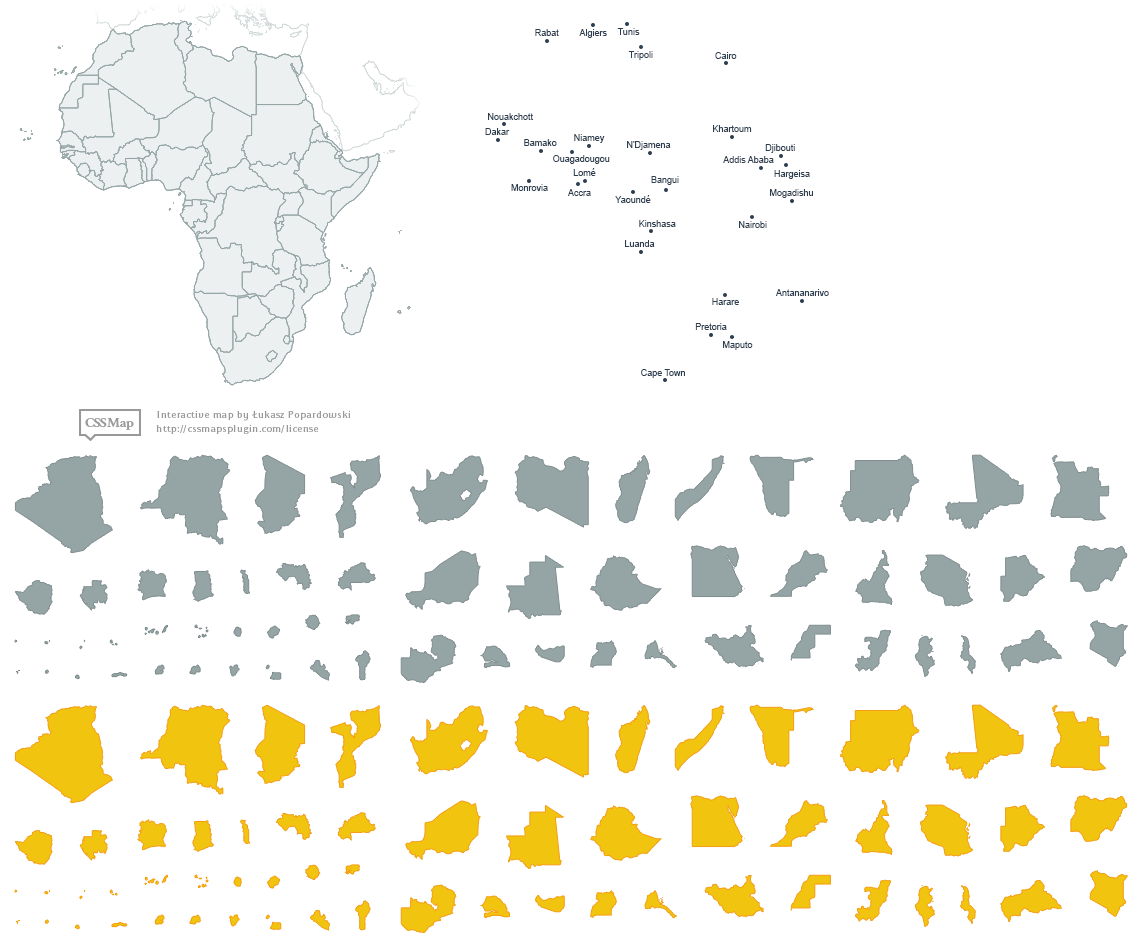
<style>
.page{position:relative;width:1142px;height:948px;background:#ffffff}
.page>*{position:absolute;margin:0}
.t1{font:9px "ArialMT";color:#2c3e50}
</style>
<div class="page">
<p class="t1" style="left:535px;top:29px;width:24px;height:7px">Rabat</p>
<p class="t1" style="left:579px;top:29px;width:28px;height:9px">Algiers</p>
<p class="t1" style="left:617px;top:28px;width:23px;height:7px">Tunis</p>
<p class="t1" style="left:628px;top:51px;width:25px;height:9px">Tripoli</p>
<p class="t1" style="left:715px;top:52px;width:22px;height:7px">Cairo</p>
<p class="t1" style="left:488px;top:113px;width:45px;height:7px">Nouakchott</p>
<p class="t1" style="left:713px;top:125px;width:39px;height:7px">Khartoum</p>
<p class="t1" style="left:485px;top:128px;width:25px;height:7px">Dakar</p>
<p class="t1" style="left:574px;top:134px;width:31px;height:9px">Niamey</p>
<p class="t1" style="left:524px;top:139px;width:33px;height:7px">Bamako</p>
<p class="t1" style="left:627px;top:141px;width:44px;height:9px">N'Djamena</p>
<p class="t1" style="left:765px;top:144px;width:30px;height:9px">Djibouti</p>
<p class="t1" style="left:553px;top:155px;width:57px;height:9px">Ouagadougou</p>
<p class="t1" style="left:723px;top:156px;width:51px;height:7px">Addis Ababa</p>
<p class="t1" style="left:573px;top:168px;width:23px;height:8px">Lomé</p>
<p class="t1" style="left:774px;top:170px;width:36px;height:9px">Hargeisa</p>
<p class="t1" style="left:511px;top:184px;width:37px;height:7px">Monrovia</p>
<p class="t1" style="left:651px;top:176px;width:28px;height:9px">Bangui</p>
<p class="t1" style="left:567px;top:189px;width:24px;height:7px">Accra</p>
<p class="t1" style="left:615px;top:195px;width:36px;height:8px">Yaoundé</p>
<p class="t1" style="left:770px;top:189px;width:43px;height:9px">Mogadishu</p>
<p class="t1" style="left:639px;top:220px;width:37px;height:7px">Kinshasa</p>
<p class="t1" style="left:739px;top:221px;width:28px;height:7px">Nairobi</p>
<p class="t1" style="left:625px;top:240px;width:30px;height:7px">Luanda</p>
<p class="t1" style="left:775px;top:289px;width:54px;height:7px">Antananarivo</p>
<p class="t1" style="left:712px;top:298px;width:27px;height:7px">Harare</p>
<p class="t1" style="left:695px;top:323px;width:32px;height:7px">Pretoria</p>
<p class="t1" style="left:723px;top:341px;width:30px;height:9px">Maputo</p>
<p class="t1" style="left:641px;top:369px;width:44px;height:9px">Cape Town</p>
</div>
